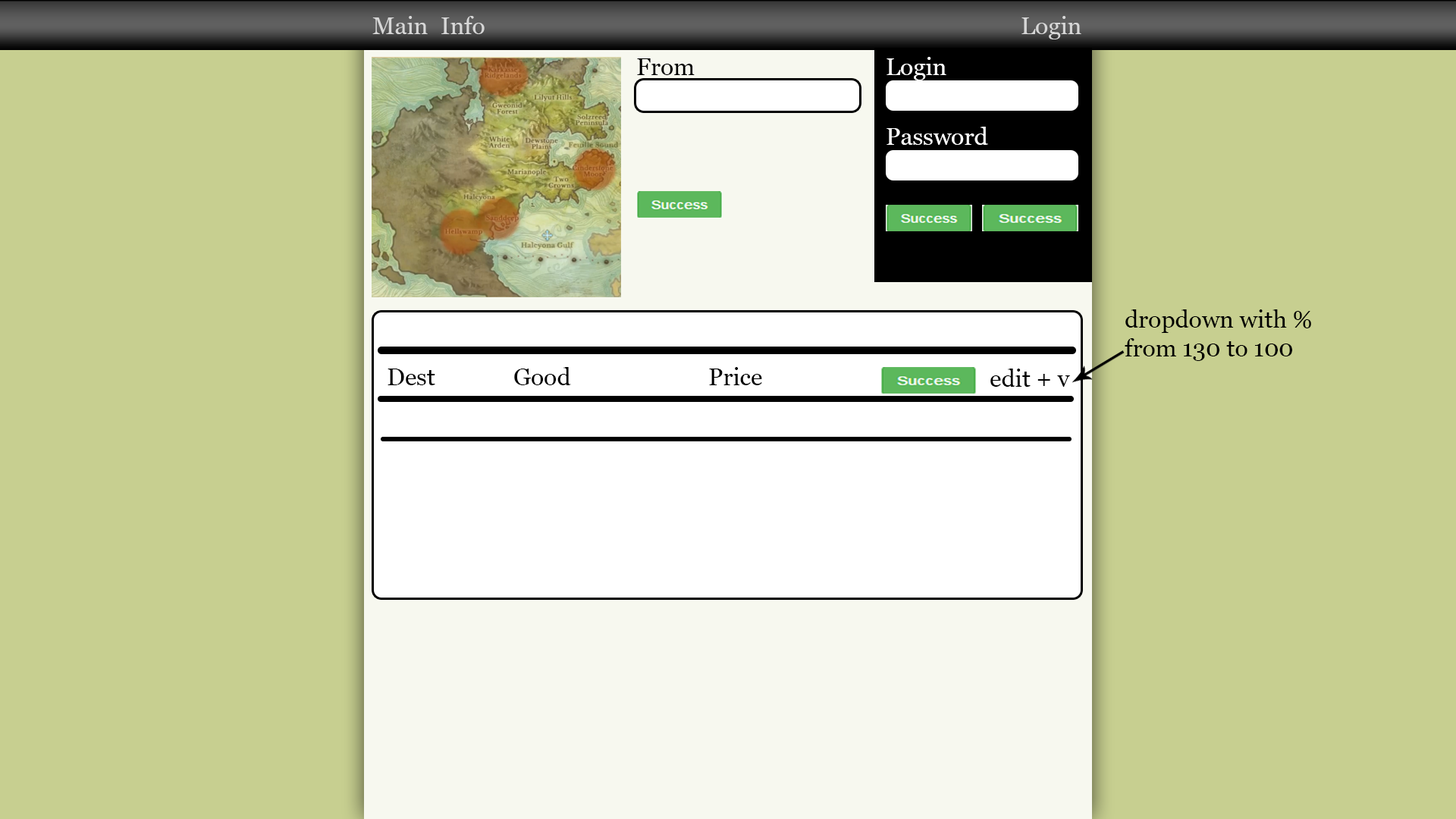
<style>
.page{position:relative;width:1456px;height:819px;background:#c7cf90}
.page>*{position:absolute;margin:0}
.t1{font:24.1px "Vani";color:#d7d7d7}
.t2{font:24.1px "Vani";color:#000000}
.t3{font:24.1px "Vani";color:#ffffff}
</style>
<div class="page">
<p class="t1" style="left:372px;top:16px;width:56px;height:18px">Main</p>
<p class="t1" style="left:441px;top:16px;width:44px;height:18px">Info</p>
<p class="t1" style="left:1021px;top:16px;width:60px;height:23px">Login</p>
<p class="t2" style="left:637px;top:58px;width:58px;height:17px">From</p>
<p class="t3" style="left:886px;top:57px;width:60px;height:23px">Login</p>
<p class="t3" style="left:886px;top:127px;width:102px;height:18px">Password</p>
<p class="t2" style="left:1125px;top:309px;width:186px;height:52px">dropdown with % from 130 to 100</p>
<p class="t2" style="left:388px;top:369px;width:47px;height:16px">Dest</p>
<p class="t2" style="left:514px;top:367px;width:57px;height:18px">Good</p>
<p class="t2" style="left:709px;top:367px;width:53px;height:18px">Price</p>
<p class="t2" style="left:990px;top:369px;width:80px;height:18px">edit + v</p>
</div>
